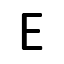
<style>
.page{position:relative;width:64px;height:64px;background:#ffffff}
.page>*{position:absolute;margin:0}
.t1{font:58.3px "Calibri";color:#000000}
</style>
<div class="page">
<p class="t1" style="left:21px;top:13px;width:22px;height:37px">Е</p>
</div>
